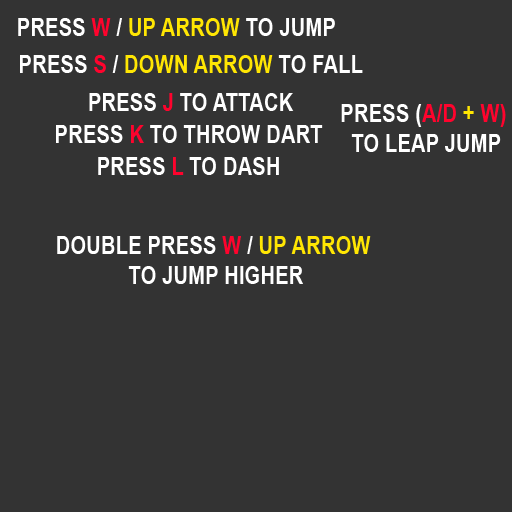
<style>
.page{position:relative;width:512px;height:512px;background:#333333}
.page>*{position:absolute;margin:0}
.t1{font:25px "Arial-BoldMT";color:#ffe603;scale:0.82 1}
.t2{font:25px "Arial-BoldMT";color:#ffffff;scale:0.82 1}
.t3{font:25px "Arial-BoldMT";color:#ff032d;scale:0.82 1}
.t4{font:25px "Arial-BoldMT";color:#ffe601;scale:0.82 1}
</style>
<div class="page">
<p class="t1" style="left:18px;top:18px;width:317px;height:18px"><span class="t2">PRESS </span><span class="t3">W </span><span class="t2">/ </span>UP ARROW<span class="t2"> TO JUMP</span></p>
<p class="t1" style="left:20px;top:55px;width:343px;height:18px"><span class="t2">PRESS </span><span class="t3">S </span><span class="t2">/ </span>DOWN ARROW<span class="t2"> TO FALL</span></p>
<p class="t2" style="left:89px;top:93px;width:205px;height:18px">PRESS <span class="t3">J </span>TO ATTACK</p>
<p class="t2" style="left:341px;top:104px;width:165px;height:48px;text-align:center">PRESS (<span class="t3">A/D </span><span class="t4">+</span><span class="t3"> W) <br></span>TO LEAP JUMP</p>
<p class="t2" style="left:56px;top:125px;width:267px;height:18px">PRESS <span class="t3">K </span>TO THROW DART</p>
<p class="t2" style="left:98px;top:157px;width:181px;height:18px">PRESS <span class="t3">L </span>TO DASH</p>
<p class="t2" style="left:57px;top:236px;width:314px;height:48px;text-align:center">DOUBLE PRESS <span class="t3">W </span>/ <span class="t1">UP ARROW</span> <br>TO JUMP HIGHER</p>
</div>
